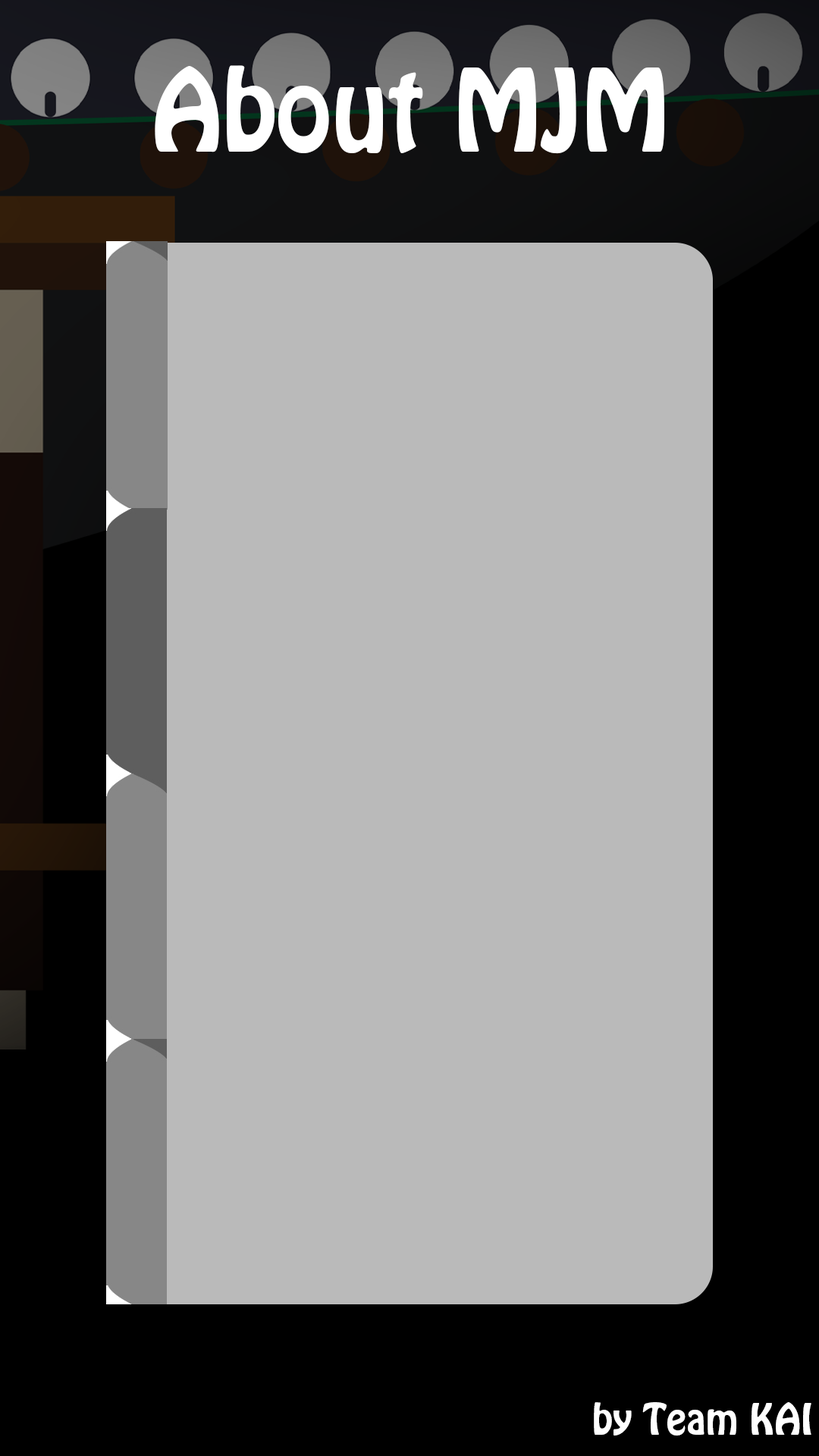
<style>
.page{position:relative;width:819px;height:1456px;background:#bababa}
.page>*{position:absolute;margin:0}
.t1{font:101.1px "HoboStd";color:#ffffff}
.t2{font:37.9px "HoboStd";color:#ffffff}
</style>
<div class="page">
<p class="t1" style="left:155px;top:65px;width:509px;height:89px">About MJM</p>
<p class="t2" style="left:594px;top:1402px;width:217px;height:34px">by Team KAI</p>
</div>
